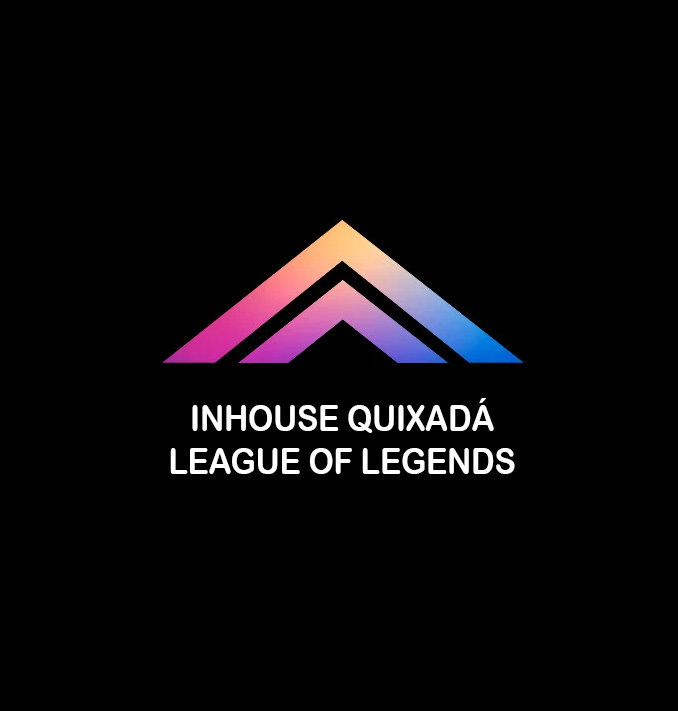
<style>
.page{position:relative;width:678px;height:711px;background:#000000}
.page>*{position:absolute;margin:0}
.t1{font:36px "ArialRoundedMTBold";color:#ffffff;scale:0.88 1}
</style>
<div class="page">
<p class="t1" style="left:170px;top:398px;width:345px;height:76px;text-align:center">INHOUSE QUIXADÁ<br>LEAGUE OF LEGENDS</p>
</div>
